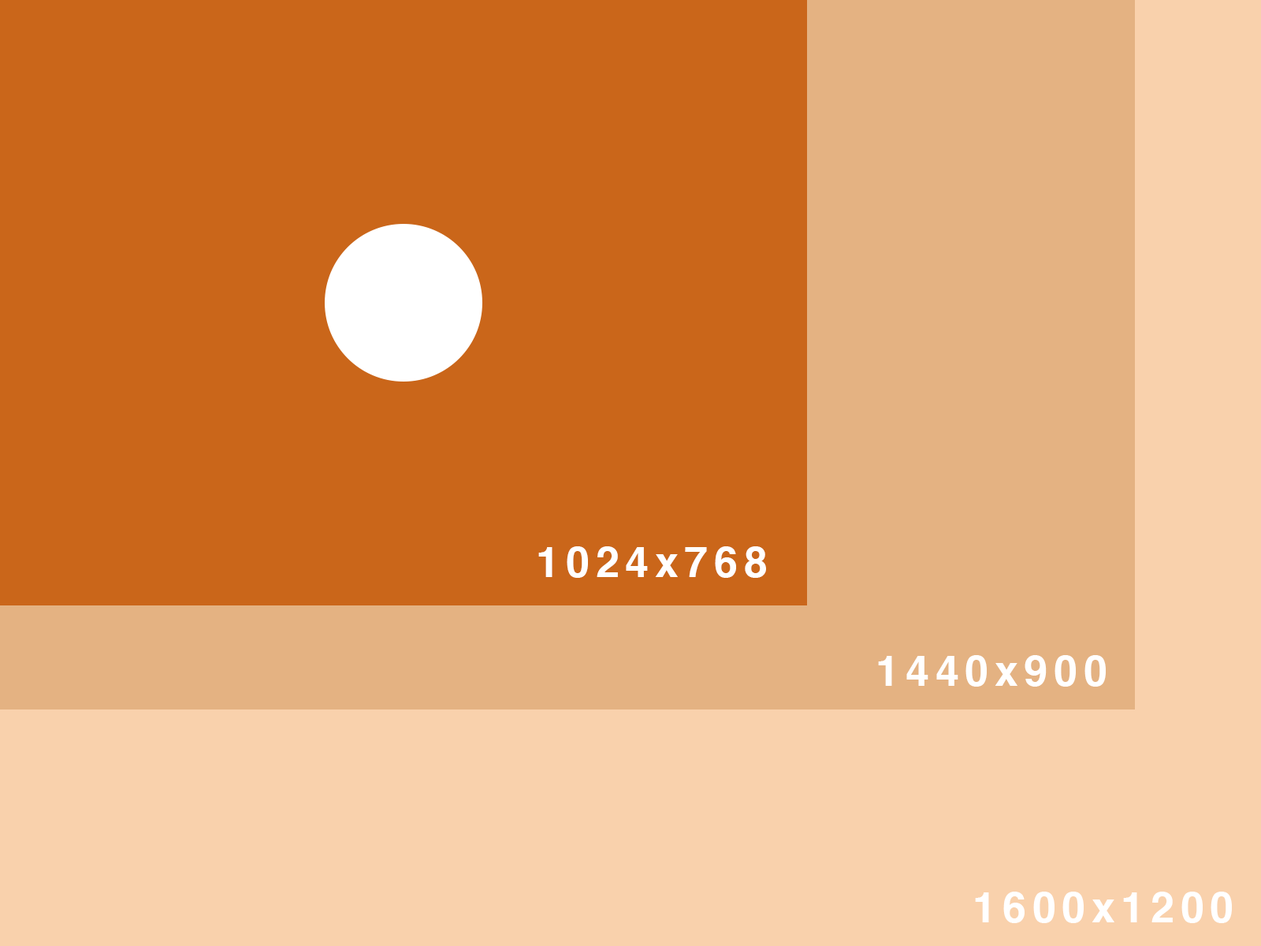
<style>
.page{position:relative;width:1261px;height:946px;background:#ca661a}
.page>*{position:absolute;margin:0}
.t1{font:42.6px "Helvetica-Bold";letter-spacing:0.14em;color:#ffffff}
</style>
<div class="page">
<p class="t1" style="left:538px;top:546px;width:228px;height:32px">1024x768</p>
<p class="t1" style="left:878px;top:655px;width:228px;height:31px">1440x900</p>
<p class="t1" style="left:975px;top:891px;width:257px;height:32px">1600x1200</p>
</div>
